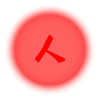
<style>
.page{position:relative;width:100px;height:100px;background:#ffffff}
.page>*{position:absolute;margin:0}
.t1{font:32px "2.0-";color:#ff0000}
</style>
<div class="page">
<p class="t1" style="left:35px;top:35px;width:30px;height:28px">人</p>
</div>
